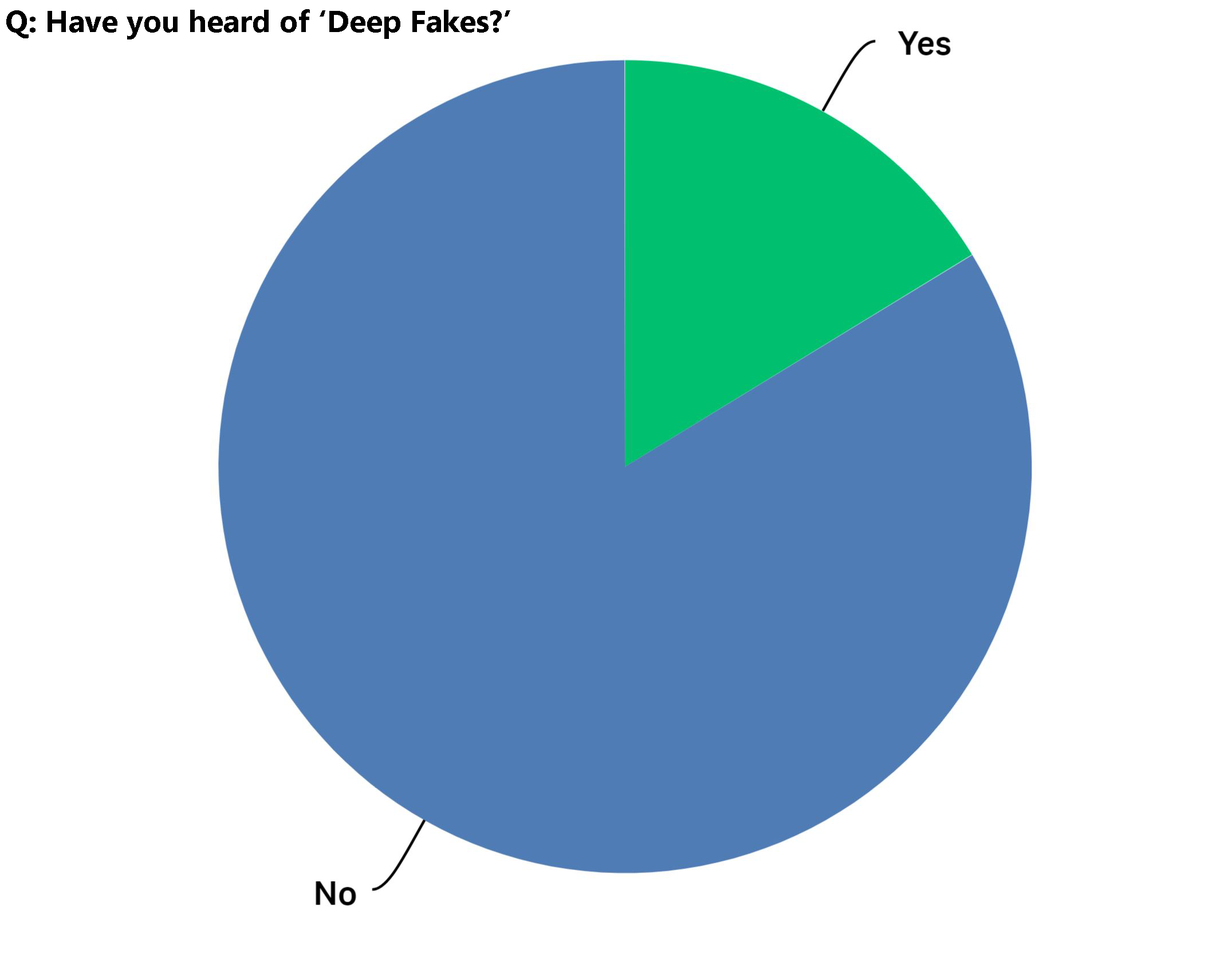
<style>
.page{position:relative;width:1232px;height:968px;background:#ffffff}
.page>*{position:absolute;margin:0}
.t1{font:30.5px "MicrosoftNewTaiLue-Bold";color:#000000}
</style>
<div class="page">
<p class="t1" style="left:6px;top:9px;width:504px;height:31px">Q: Have you heard of ‘Deep Fakes?’</p>
</div>
